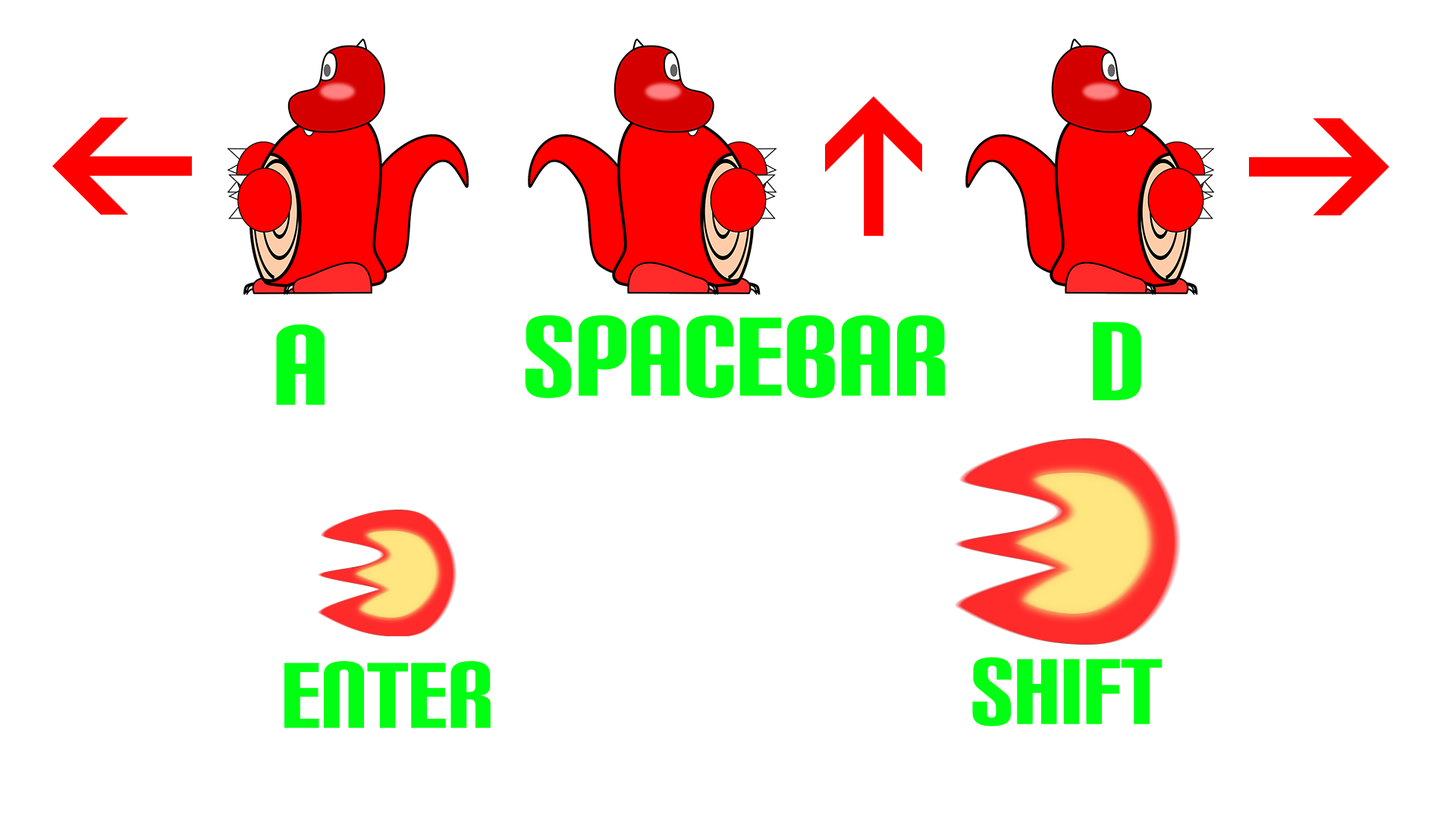
<style>
.page{position:relative;width:1456px;height:819px;background:#ffffff}
.page>*{position:absolute;margin:0}
.t1{font:109.4px "CarbonBl-Regular";color:#00ff12}
.t2{font:90.9px "CarbonBl-Regular";color:#00ff12}
</style>
<div class="page">
<p class="t1" style="left:525px;top:315px;width:420px;height:83px">spacebar</p>
<p class="t1" style="left:276px;top:324px;width:49px;height:81px">A</p>
<p class="t1" style="left:1093px;top:322px;width:48px;height:78px">D</p>
<p class="t2" style="left:284px;top:660px;width:207px;height:68px">enter</p>
<p class="t2" style="left:972px;top:657px;width:191px;height:69px">SHIFT</p>
</div>
